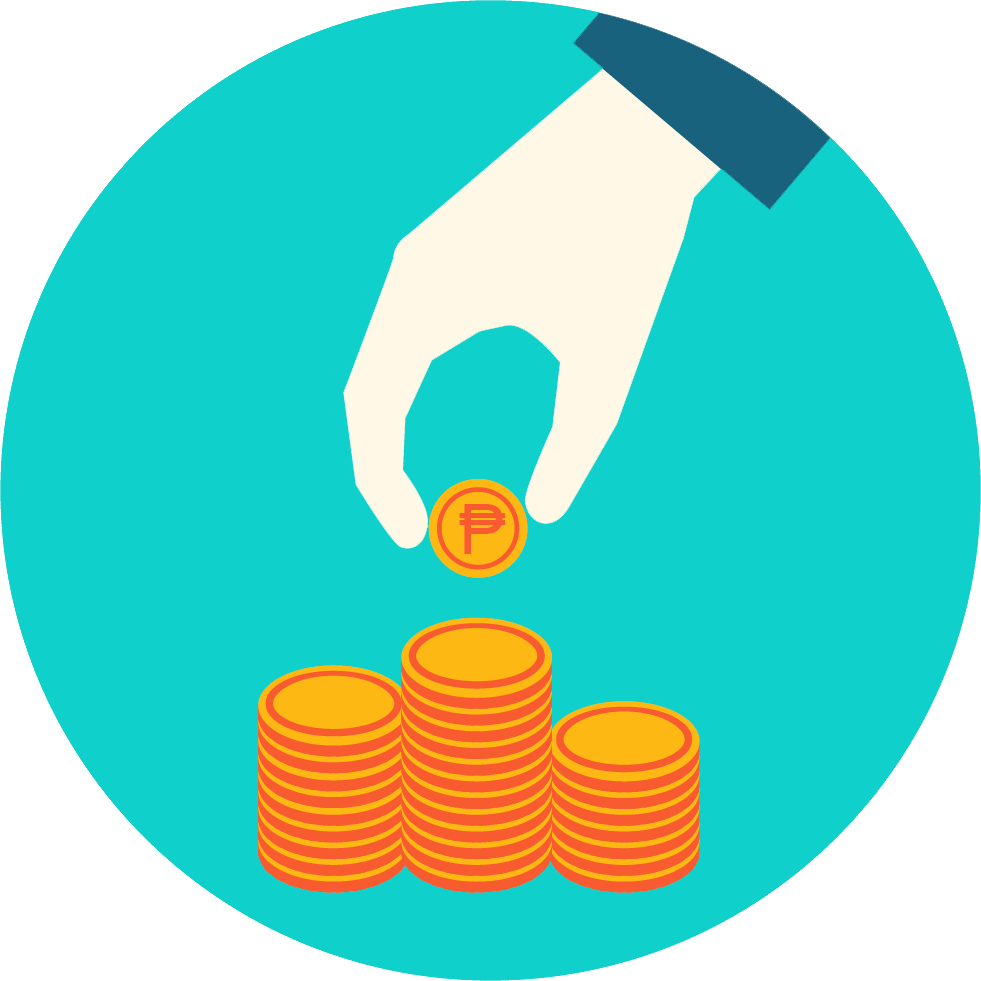
<style>
.page{position:relative;width:981px;height:981px;background:#0fd0ca}
.page>*{position:absolute;margin:0}
.t1{font:70px "ArialMT";color:#f95a30}
</style>
<div class="page">
<p class="t1" style="left:459px;top:504px;width:46px;height:50px">₱</p>
</div>
